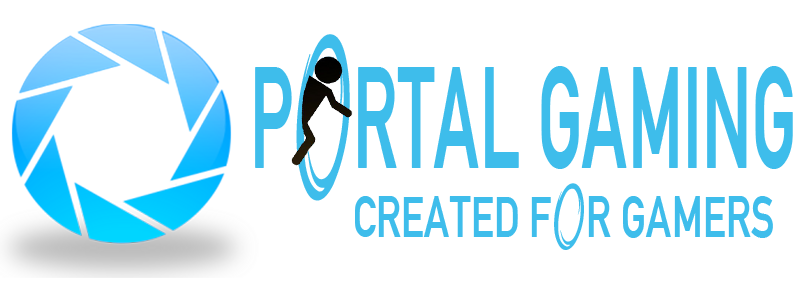
<style>
.page{position:relative;width:800px;height:300px;background:#ffffff}
.page>*{position:absolute;margin:0}
.t1{font:142.4px "AlteDIN1451Mittelschriftgepraegt";color:#3ebdec;scale:0.51 1}
.t2{font:57.3px "AlteDIN1451Mittelschriftgepraegt";color:#3ebdec;scale:0.72 1}
</style>
<div class="page">
<p class="t1" style="left:255px;top:34px;width:538px;height:167px">PORTAL GAMING</p>
<p class="t2" style="left:355px;top:183px;width:418px;height:67px">CREATED FOR GAMERS</p>
</div>
